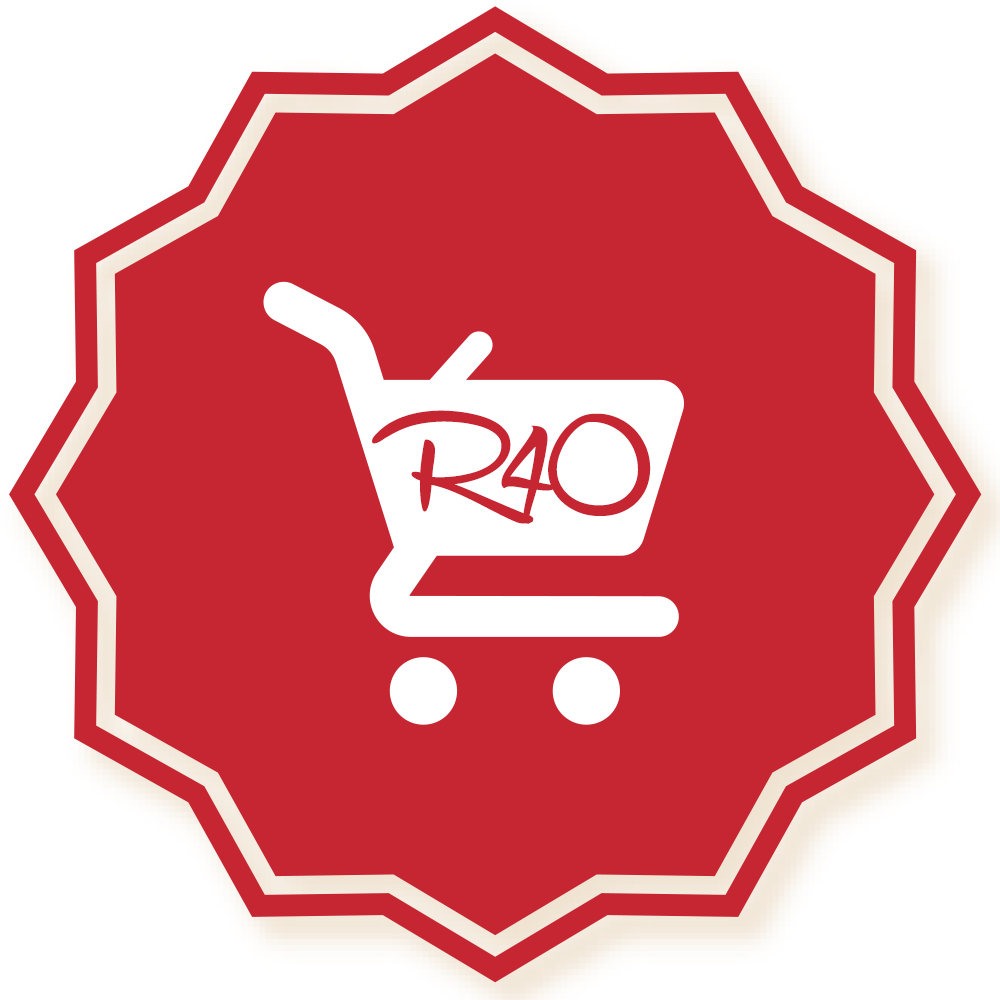
<style>
.page{position:relative;width:1000px;height:1000px;background:#c52632}
.page>*{position:absolute;margin:0}
.t1{font:140px "RemachineScriptPersonalUse";letter-spacing:-0.06em;color:#c52632}
.t2{font:140px "DeadlyInked";letter-spacing:-0.12em;color:#c52632}
.t3{font:140px "RemachineScriptPersonalUse";letter-spacing:-0.12em;color:#c52632}
</style>
<div class="page">
<p class="t1" style="left:372px;top:410px;width:279px;height:114px">R<span class="t2">4</span><span class="t3">O</span></p>
</div>
